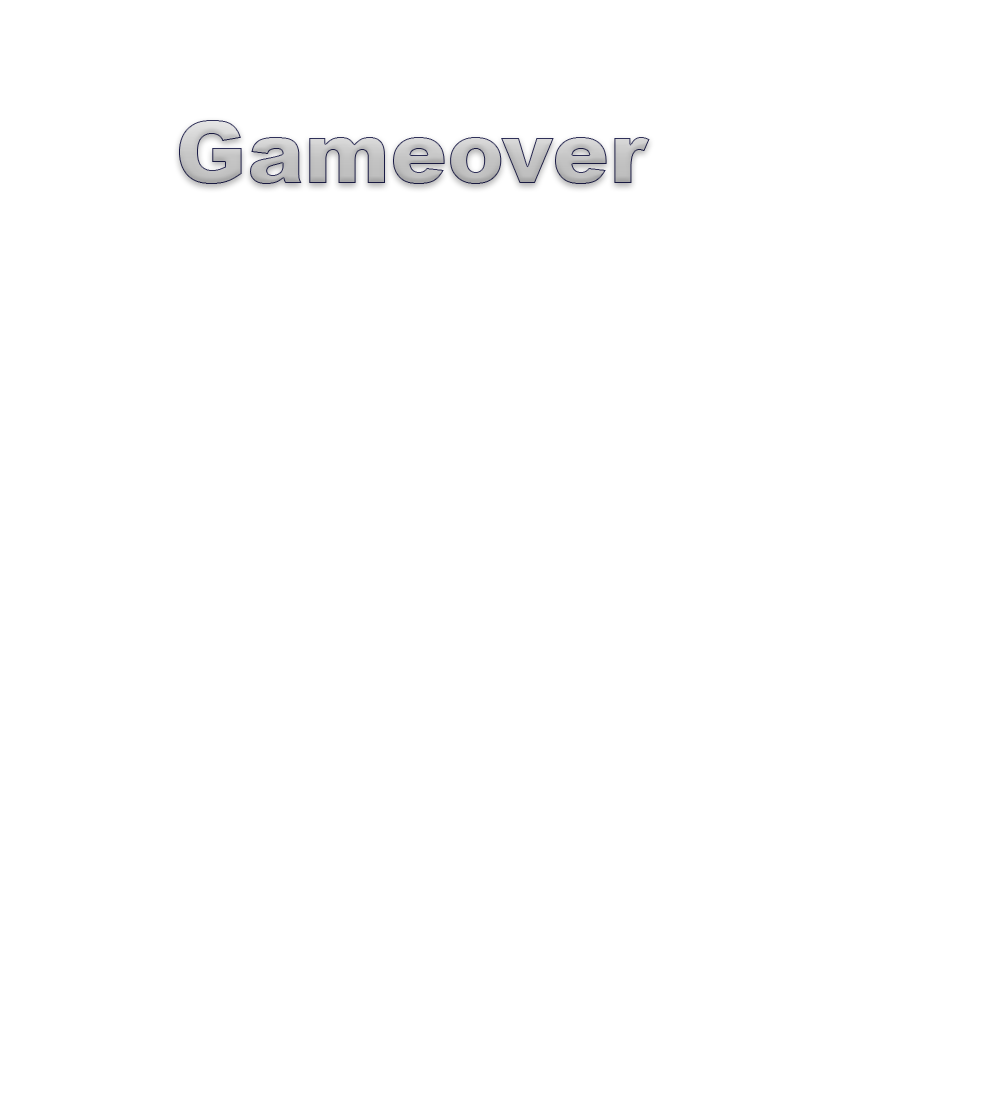
<style>
.page{position:relative;width:995px;height:1103px;background:#ffffff}
.page>*{position:absolute;margin:0}
.t1{font:85.9px "Arial-Black"}
</style>
<div class="page">
<p class="t1" style="left:179px;top:120px;width:471px;height:64px">Gameover</p>
</div>
